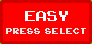
<style>
.page{position:relative;width:92px;height:44px;background:#ff0000}
.page>*{position:absolute;margin:0}
.t1{font:20px "ArcadeClassic";color:#ffffff}
.t2{font:12.4px "ArcadeClassic";color:#e6e6e6;scale:0.97 1}
</style>
<div class="page">
<p class="t1" style="left:25px;top:11px;width:43px;height:10px">EASY</p>
<p class="t2" style="left:6px;top:28px;width:80px;height:6px">press  select</p>
</div>
